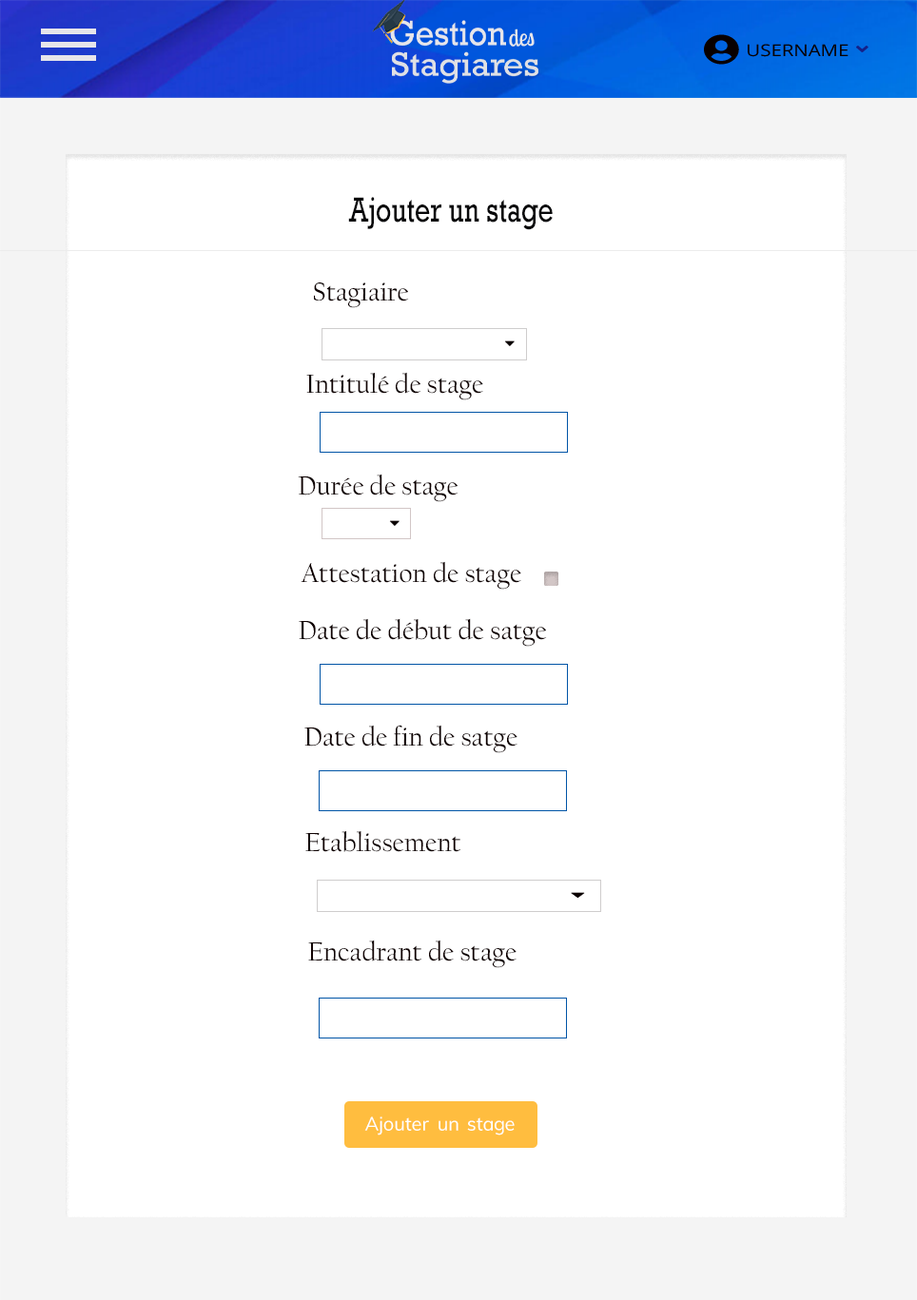
<style>
.page{position:relative;width:917px;height:1300px;background:#ffffff}
.page>*{position:absolute;margin:0}
.t1{font:16.4px "OpenSans";color:#080000;scale:1.18 1}
.t2{font:35.1px "Rockwell";color:#070709;scale:0.77 1}
.t3{font:27.1px "CalifornianFB-Reg";color:#100202}
</style>
<div class="page">
<p class="t1" style="left:748px;top:44px;width:101px;height:13px">USERNAME</p>
<p class="t2" style="left:348px;top:197px;width:205px;height:33px">Ajouter un stage</p>
<p class="t3" style="left:314px;top:283px;width:95px;height:25px">Stagiaire</p>
<p class="t3" style="left:306px;top:372px;width:177px;height:28px">Intitulé de stage</p>
<p class="t3" style="left:298px;top:474px;width:161px;height:28px">Durée de stage</p>
<p class="t3" style="left:301px;top:561px;width:220px;height:29px">Attestation de stage</p>
<p class="t3" style="left:299px;top:618px;width:248px;height:29px">Date de début de satge</p>
<p class="t3" style="left:304px;top:725px;width:213px;height:28px">Date de fin de satge</p>
<p class="t3" style="left:305px;top:831px;width:155px;height:21px">Etablissement</p>
<p class="t3" style="left:308px;top:940px;width:209px;height:28px">Encadrant de stage</p>
</div>
